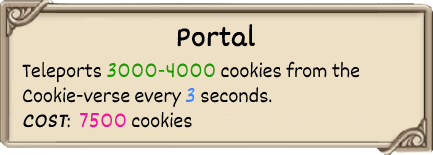
<style>
.page{position:relative;width:433px;height:155px;background:#ede0c4}
.page>*{position:absolute;margin:0}
.t1{font:30px "Dekko";color:#000000;font-weight:bold}
.t2{font:21px "Dekko";color:#000000}
.t3{font:21px "Dekko";color:#1b9902}
.t4{font:21px "Dekko";color:#4086fa}
.t5{font:21px "Dekko";color:#000000;font-weight:bold;font-style:italic}
.t6{font:21px "Dekko";color:#f0129a}
</style>
<div class="page">
<p class="t1" style="left:177px;top:24px;width:78px;height:23px">Portal</p>
<p class="t2" style="left:22px;top:61px;width:338px;height:67px">Teleports <span class="t3">3000-4000 </span>cookies from the <br>Cookie-verse every <span class="t4">3 </span>seconds.<br><span class="t5">COST</span>:  <span class="t6">7500 </span>cookies</p>
</div>
